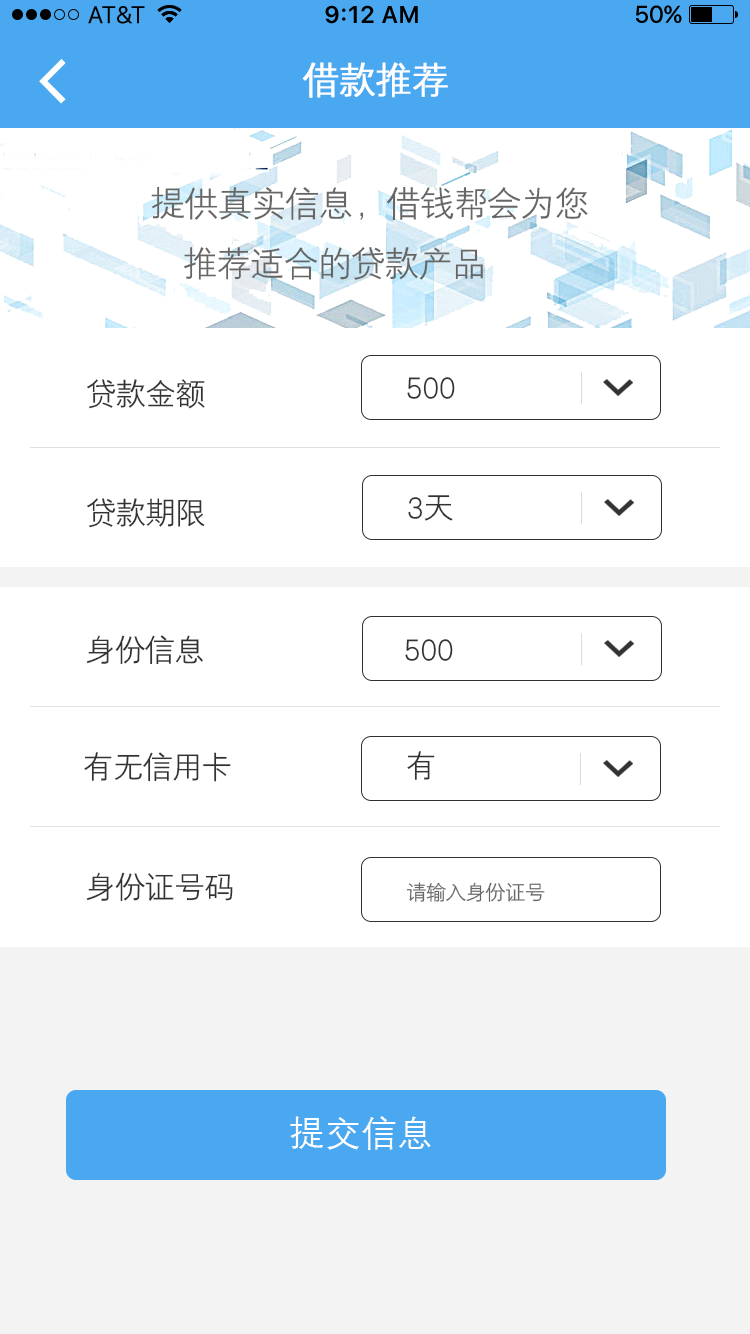
<style>
.page{position:relative;width:750px;height:1334px;background:#ffffff}
.page>*{position:absolute;margin:0}
.t1{font:36px "HYZhongJianHeiJ";letter-spacing:-0.01em;color:#ffffff;font-weight:bold}
.t2{font:34px "HYZhongJianHeiJ";letter-spacing:-0.01em;color:#666666}
.t3{font:30px "HYZhongJianHeiJ";letter-spacing:-0.01em;color:#333333}
.t4{font:20px "HYZhongJianHeiJ";letter-spacing:-0.01em;color:#666666}
.t5{font:36px "HYg2gj";color:#ffffff}
</style>
<div class="page">
<p class="t1" style="left:302px;top:62px;width:146px;height:36px">借款推荐</p>
<p class="t2" style="left:151px;top:186px;width:437px;height:94px">提供真实信息，借钱帮会为您<br>    推荐适合的贷款产品</p>
<p class="t3" style="left:407px;top:377px;width:48px;height:22px">500</p>
<p class="t3" style="left:87px;top:379px;width:118px;height:30px">贷款金额</p>
<p class="t3" style="left:408px;top:495px;width:45px;height:26px">3天</p>
<p class="t3" style="left:87px;top:498px;width:118px;height:30px">贷款期限</p>
<p class="t3" style="left:86px;top:635px;width:117px;height:30px">身份信息</p>
<p class="t3" style="left:405px;top:639px;width:48px;height:22px">500</p>
<p class="t3" style="left:84px;top:752px;width:147px;height:30px">有无信用卡</p>
<p class="t3" style="left:407px;top:751px;width:28px;height:29px">有</p>
<p class="t3" style="left:86px;top:872px;width:147px;height:30px">身份证号码</p>
<p class="t4" style="left:406px;top:882px;width:139px;height:20px">请输入身份证号</p>
<p class="t5" style="left:290px;top:1116px;width:141px;height:34px">提交信息</p>
</div>
